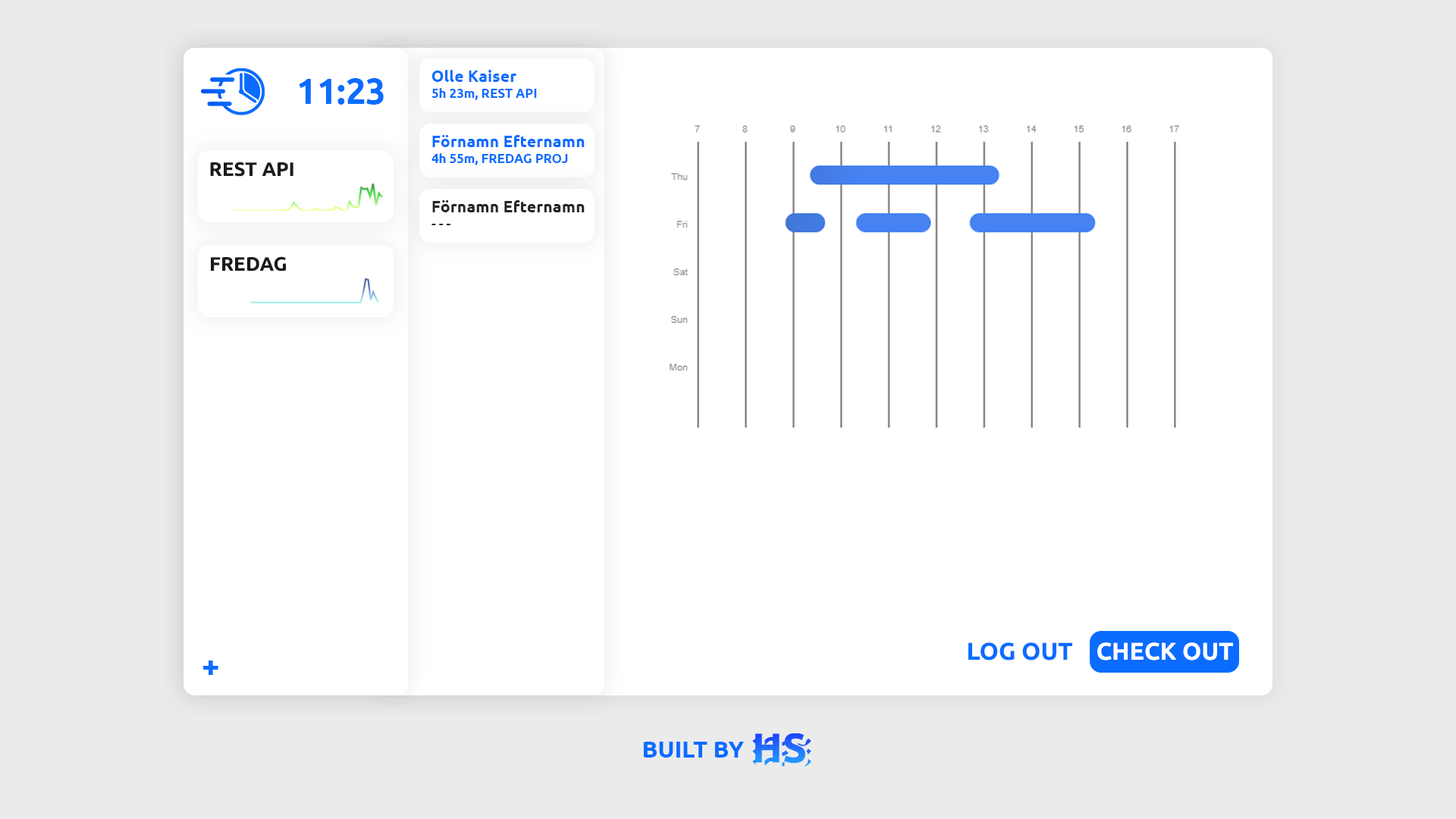
<style>
.page{position:relative;width:1456px;height:819px;background:#ffffff}
.page>*{position:absolute;margin:0}
.t1{font:16.3px "Ubuntu-Bold";color:#0a6cff}
.t2{font:35.3px "Ubuntu-Bold";color:#0a6cff}
.t3{font:12.8px "Ubuntu-Bold";color:#0a6cff}
.t4{font:19.6px "Ubuntu-Bold";color:#1b1b1b}
.t5{font:16.3px "Ubuntu-Bold";color:#252525}
.t6{font:12.8px "Ubuntu-Bold";color:#252525}
.t7{font:24.3px "Ubuntu-Bold";color:#0a6cff}
.t8{font:24.3px "Ubuntu-Bold";color:#ffffff}
.t9{font:32.1px "Ubuntu-Bold";color:#0a6cff}
.t10{font:23.5px "Ubuntu-Bold";color:#0a6cff}
</style>
<div class="page">
<p class="t1" style="left:431px;top:70px;width:85px;height:12px">Olle Kaiser</p>
<p class="t2" style="left:299px;top:78px;width:85px;height:27px">11:23</p>
<p class="t3" style="left:431px;top:88px;width:106px;height:12px">5h 23m, REST API</p>
<p class="t1" style="left:432px;top:135px;width:153px;height:12px">Förnamn Efternamn</p>
<p class="t4" style="left:210px;top:162px;width:83px;height:15px">REST API</p>
<p class="t3" style="left:431px;top:153px;width:137px;height:12px">4h 55m, FREDAG PROJ</p>
<p class="t5" style="left:432px;top:200px;width:153px;height:12px">Förnamn Efternamn</p>
<p class="t6" style="left:431px;top:224px;width:19px;height:1px">- - -</p>
<p class="t4" style="left:211px;top:256px;width:75px;height:15px">FREDAG</p>
<p class="t7" style="left:968px;top:642px;width:104px;height:18px">LOG OUT</p>
<p class="t8" style="left:1097px;top:642px;width:136px;height:18px">CHECK OUT</p>
<p class="t9" style="left:203px;top:660px;width:15px;height:15px">+</p>
<p class="t10" style="left:643px;top:742px;width:101px;height:16px">BUILT BY</p>
</div>
